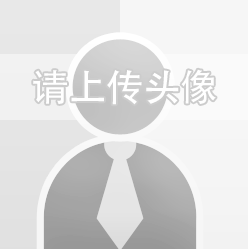
<style>
.page{position:relative;width:249px;height:249px}
.page>*{position:absolute;margin:0}
.t1{font:37px "AdobeHeitiStd-Regular";color:#ffffff}
</style>
<div class="page">
<p class="t1" style="left:33px;top:69px;width:183px;height:36px">请上传头像</p>
</div>
